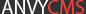
<style>
.page{position:relative;width:86px;height:14px;background:#333333}
.page>*{position:absolute;margin:0}
.t1{font:20px "MyriadPro-Regular";color:#ffffff}
.t2{font:20px "MyriadPro-Regular";color:#ff3f3f}
</style>
<div class="page">
<p class="t1" style="left:1px;top:0px;width:83px;height:14px">ANVY<span class="t2">CMS</span></p>
</div>
